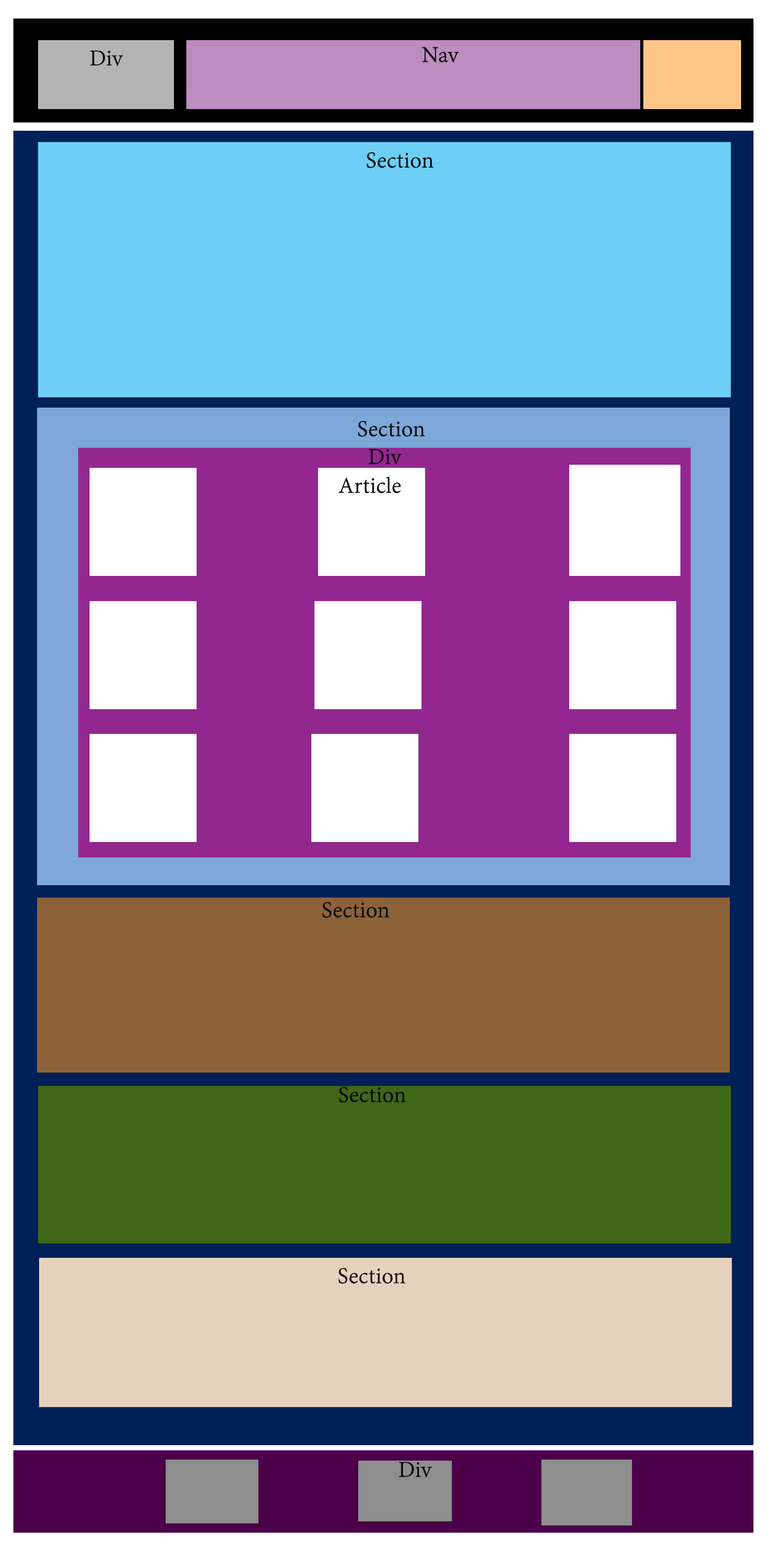
<style>
.page{position:relative;width:772px;height:1544px}
.page>*{position:absolute;margin:0}
.t1{font:24.7px "AdobeDevanagari-Regular";color:#060808}
.t2{font:24.6px "AdobeDevanagari-Regular";color:#060808}
</style>
<div class="page">
<p class="t1" style="left:90px;top:50px;width:33px;height:16px">Div</p>
<p class="t1" style="left:422px;top:47px;width:37px;height:16px">Nav</p>
<p class="t1" style="left:367px;top:152px;width:66px;height:16px">Section</p>
<p class="t1" style="left:358px;top:421px;width:67px;height:16px">Section</p>
<p class="t1" style="left:369px;top:449px;width:33px;height:16px">Div</p>
<p class="t1" style="left:339px;top:477px;width:62px;height:17px">Article</p>
<p class="t2" style="left:322px;top:902px;width:68px;height:16px">Section</p>
<p class="t2" style="left:339px;top:1087px;width:67px;height:16px">Section</p>
<p class="t2" style="left:338px;top:1268px;width:68px;height:16px">Section</p>
<p class="t1" style="left:399px;top:1462px;width:33px;height:16px">Div</p>
</div>
